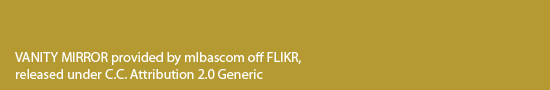
<style>
.page{position:relative;width:550px;height:90px;background:#b59a31}
.page>*{position:absolute;margin:0}
.t1{font:14px "MyriadPro-Regular";color:#ffffff}
</style>
<div class="page">
<p class="t1" style="left:15px;top:52px;width:286px;height:27px">VANITY MIRROR provided by mlbascom off FLIKR,<br>released under C.C. Attribution 2.0 Generic</p>
</div>
